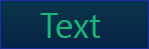
<style>
.page{position:relative;width:149px;height:49px}
.page>*{position:absolute;margin:0}
.t1{font:35px "SegoeUISymbol";color:#19b579}
</style>
<div class="page">
<p class="t1" style="left:40px;top:13px;width:60px;height:25px">Text</p>
</div>
